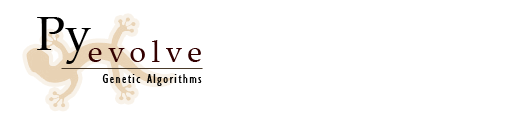
<style>
.page{position:relative;width:530px;height:125px;background:#ffffff}
.page>*{position:absolute;margin:0}
.t1{font:48px "PalatinoLinotype-Roman";color:#000000}
.t2{font:30px "PalatinoLinotype-Roman";letter-spacing:0.18em;color:#330000}
.t3{font:14px "GillSansMT-Condensed";letter-spacing:0.1em;color:#000000}
</style>
<div class="page">
<p class="t1" style="left:37px;top:17px;width:54px;height:47px">Py</p>
<p class="t2" style="left:88px;top:40px;width:113px;height:22px">evolve</p>
<p class="t3" style="left:102px;top:74px;width:100px;height:12px">Genetic Algorithms</p>
</div>
